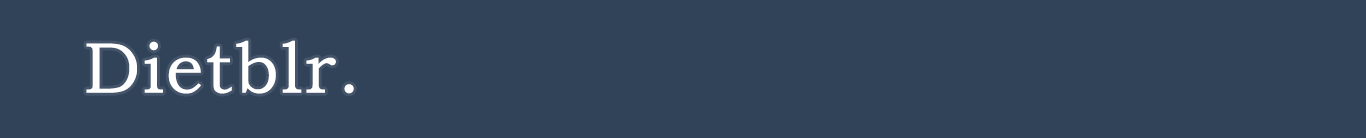
<style>
.page{position:relative;width:1366px;height:138px;background:#314358}
.page>*{position:absolute;margin:0}
.t1{font:72px "BookmanOldStyle";letter-spacing:0.025em;color:#ffffff}
</style>
<div class="page">
<p class="t1" style="left:86px;top:40px;width:268px;height:54px">Dietblr.</p>
</div>
